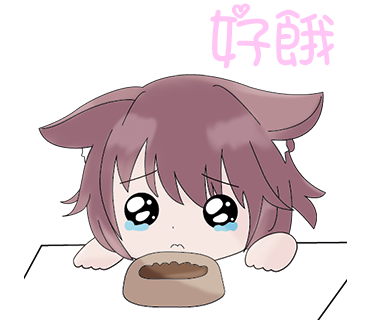
<style>
.page{position:relative;width:370px;height:320px;background:#ffffff}
.page>*{position:absolute;margin:0}
.t1{font:70.1px "ARTianniuB5-Bold";letter-spacing:-0.04em;color:#ffc6f5}
</style>
<div class="page">
<p class="t1" style="left:210px;top:3px;width:125px;height:66px">好餓</p>
</div>
